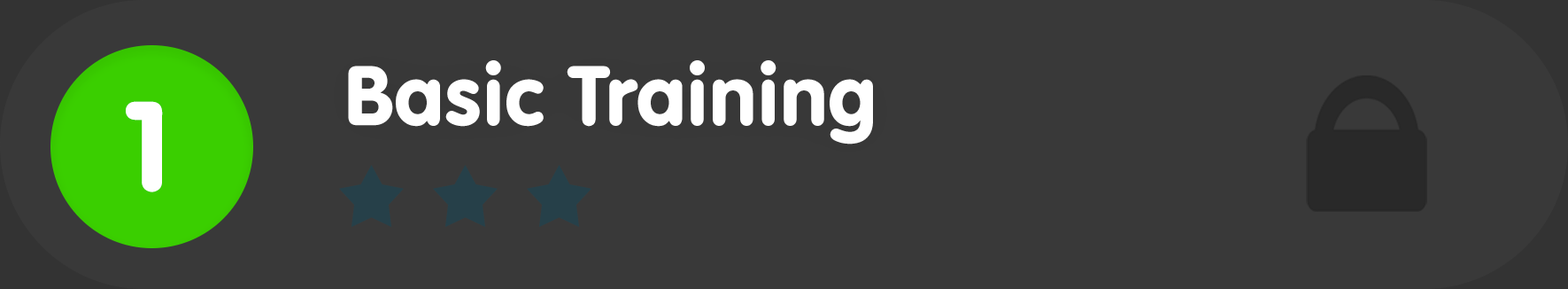
<style>
.page{position:relative;width:1568px;height:289px;background:#393939}
.page>*{position:absolute;margin:0}
.t1{font:88.5px "VAGRundschriftD";color:#ffffff}
.t2{font:132.8px "VAGRundschriftD";color:#ffffff}
</style>
<div class="page">
<p class="t1" style="left:348px;top:60px;width:525px;height:84px">Basic Training</p>
<p class="t2" style="left:126px;top:101px;width:37px;height:91px">1</p>
</div>
